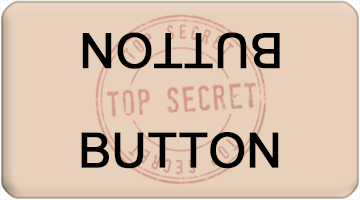
<style>
.page{position:relative;width:360px;height:200px;background:#e8d0bb}
.page>*{position:absolute;margin:0}
.t1{font:48px "ArialMT";color:#000000;font-weight:bold}
</style>
<div class="page">
<p class="t1" style="left:82px;top:32px;width:198px;height:37px;rotate:180deg">BUTTON</p>
<p class="t1" style="left:81px;top:132px;width:198px;height:37px">BUTTON</p>
</div>
